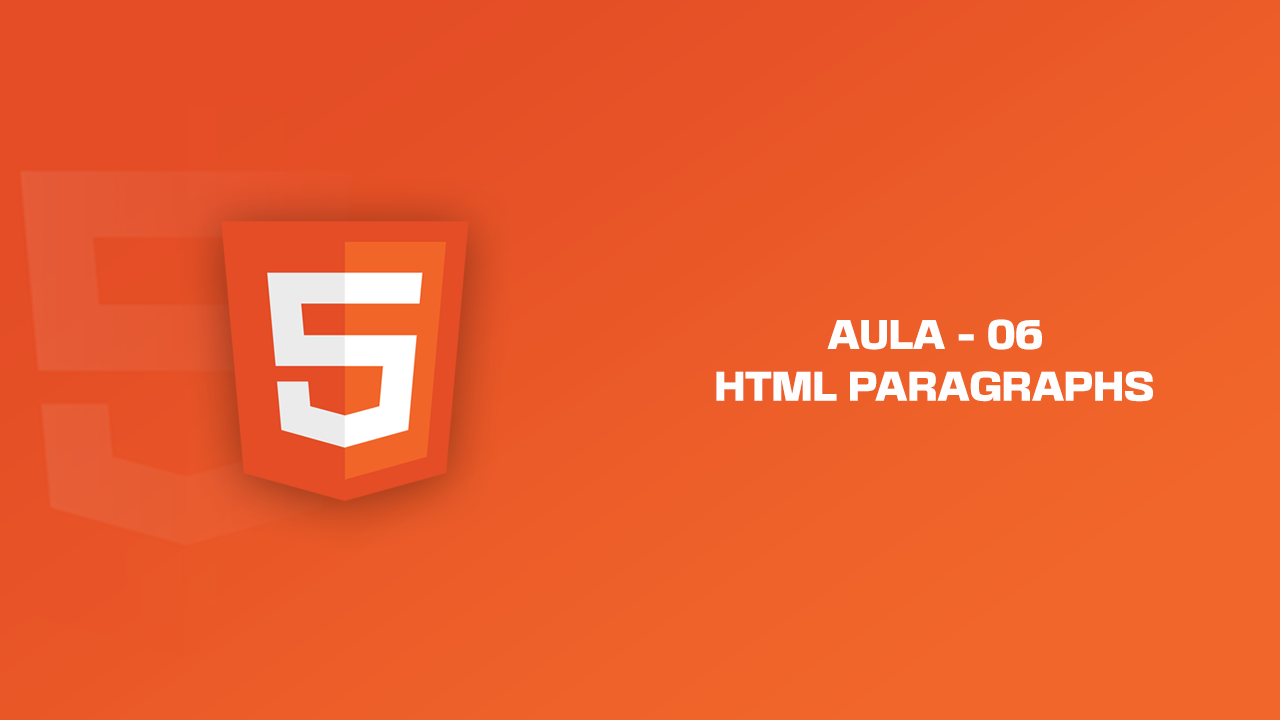
<style>
.page{position:relative;width:1280px;height:720px}
.page>*{position:absolute;margin:0}
.t1{font:37.3px "BasementGrotesque-Black";color:#fefefe;text-transform:uppercase}
</style>
<div class="page">
<p class="t1" style="left:827px;top:319px;width:215px;height:31px">aula - 06</p>
<p class="t1" style="left:716px;top:371px;width:437px;height:31px">HTML Paragraphs</p>
</div>
